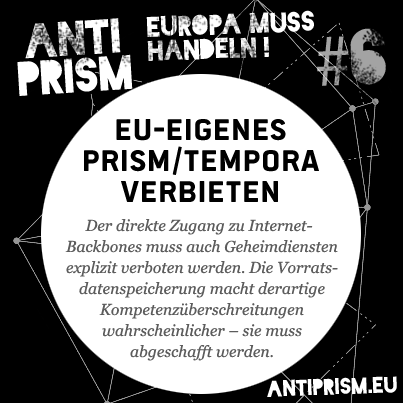
<style>
.page{position:relative;width:403px;height:403px;background:#000000}
.page>*{position:absolute;margin:0}
.t1{font:26.8px/23.9px "Blackout-Midnight";color:#ffffff}
.t2{font:45.7px/37.2px "Blackout-Midnight";color:#ffffff}
.t3{font:74.8px "MyriadPro-Regular"}
.t4{font:74.8px "Blackout-Midnight"}
.t5{font:33px/31px "PoliticsHead-Bold";color:#000000}
.t6{font:15.8px/21px "Georgia-Italic";color:#5c5c5c}
.t7{font:21.6px "Blackout-Midnight";color:#ffffff}
</style>
<div class="page">
<p class="t1" style="left:146px;top:10px;width:168px;height:51px;rotate:-2deg">EUROPA MUSS<br>HANDELN !</p>
<p class="t2" style="left:17px;top:18px;width:116px;height:78px;text-align:center;rotate:-4deg">ANTI<br>PRISM</p>
<p class="t3" style="left:317px;top:28px;width:69px;height:58px;rotate:-2deg">#<span class="t4">6</span></p>
<p class="t5" style="left:84px;top:119px;width:235px;height:83px;text-align:center">EU-EIGENES<br>PRISM/TEMPORA<br>VERBIETEN</p>
<p class="t6" style="left:65px;top:219px;width:273px;height:142px;text-align:center">Der direkte Zugang zu Internet-Backbones muss auch Geheimdiensten explizit verboten werden. Die Vorratsdatenspeicherung macht derartige Kompetenzüberschreitungen<br>wahrscheinlicher – sie muss<br>abgeschafft werden.</p>
<p class="t7" style="left:267px;top:376px;width:130px;height:21px;rotate:-2deg">antiprism.eu</p>
</div>
